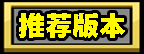
<style>
.page{position:relative;width:144px;height:54px;background:#000000}
.page>*{position:absolute;margin:0}
.t1{font:27px "CloudRuiHeiGBK";color:#fef901}
</style>
<div class="page">
<p class="t1" style="left:19px;top:13px;width:106px;height:25px">推荐版本</p>
</div>
